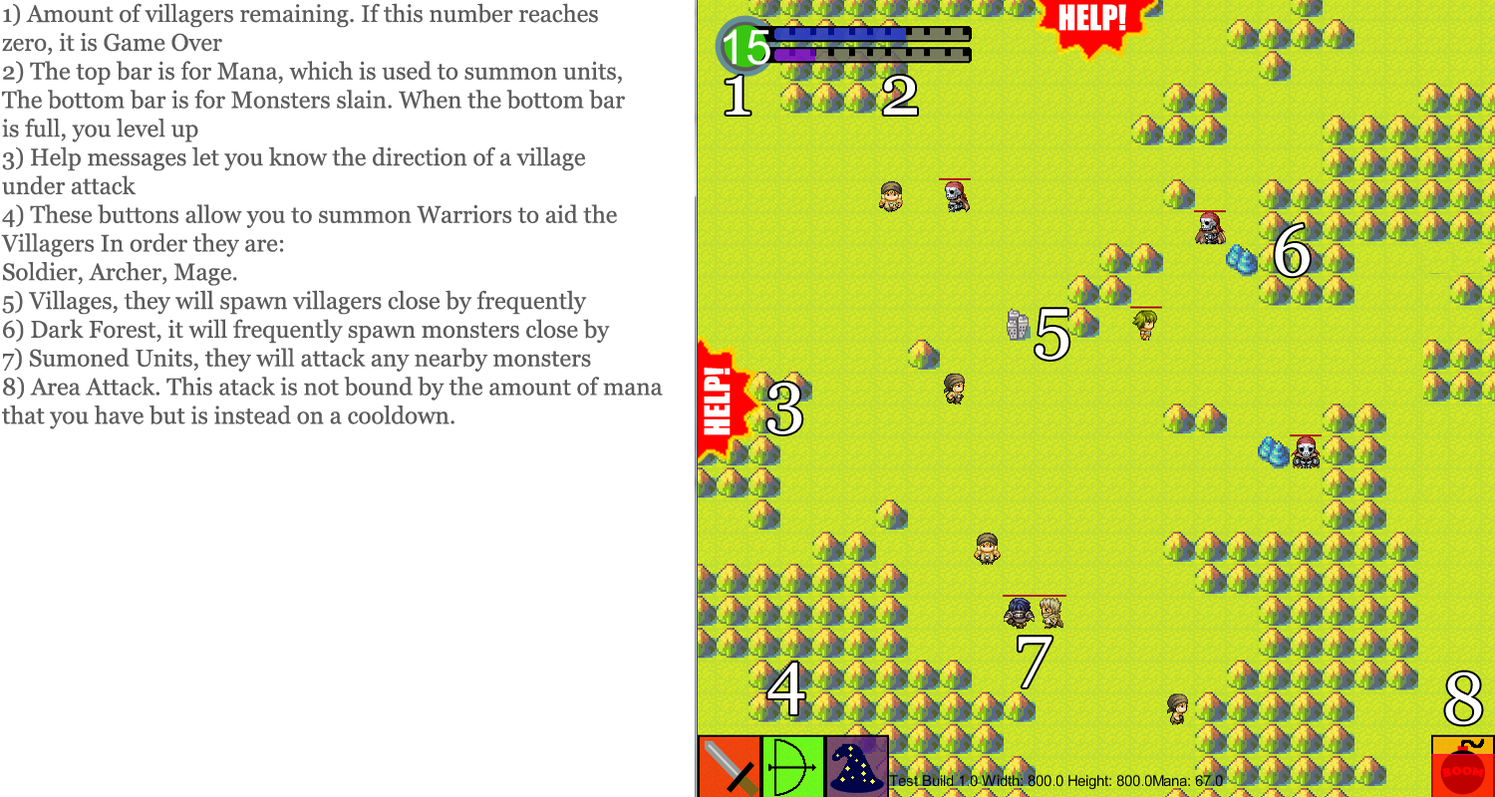
<style>
.page{position:relative;width:1495px;height:797px;background:#ffffff}
.page>*{position:absolute;margin:0}
.t1{font:23.9px "Georgia";color:#5d5c5c}
</style>
<div class="page">
<p class="t1" style="left:1px;top:3px;width:662px;height:427px">1) Amount of villagers remaining. If this number reaches <br>zero, it is Game Over<br>2) The top bar is for Mana, which is used to summon units, <br>The bottom bar is for Monsters slain. When the bottom bar <br>is full, you level up<br>3) Help messages let you know the direction of a village <br>under attack<br>4) These buttons allow you to summon Warriors to aid the <br>Villagers In order they are:<br>Soldier, Archer, Mage. <br>5) Villages, they will spawn villagers close by frequently<br>6) Dark Forest, it will frequently spawn monsters close by<br>7) Sumoned Units, they will attack any nearby monsters<br>8) Area Attack. This atack is not bound by the amount of mana <br>that you have but is instead on a cooldown.</p>
</div>
